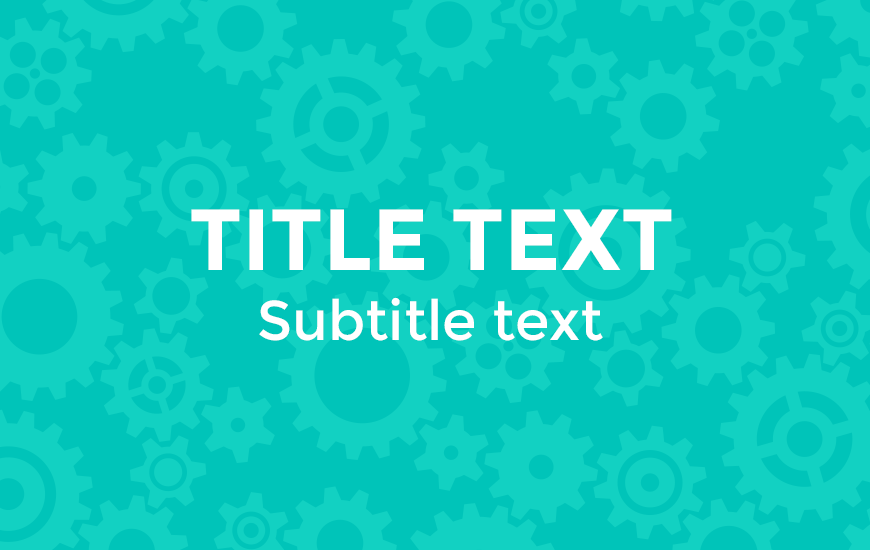
<style>
.page{position:relative;width:870px;height:550px;background:#00c4b9}
.page>*{position:absolute;margin:0}
.t1{font:86.6px "Montserrat-Bold";color:#ffffff}
.t2{font:55.6px "Montserrat-Regular";color:#ffffff}
</style>
<div class="page">
<p class="t1" style="left:191px;top:209px;width:481px;height:61px">TITLE TEXT</p>
<p class="t1" style="left:191px;top:209px;width:481px;height:61px">TITLE TEXT</p>
<p class="t1" style="left:191px;top:209px;width:481px;height:61px">TITLE TEXT</p>
<p class="t1" style="left:191px;top:209px;width:481px;height:61px">TITLE TEXT</p>
<p class="t2" style="left:259px;top:297px;width:344px;height:44px">Subtitle text</p>
<p class="t2" style="left:259px;top:297px;width:344px;height:44px">Subtitle text</p>
<p class="t2" style="left:259px;top:297px;width:344px;height:44px">Subtitle text</p>
<p class="t2" style="left:259px;top:297px;width:344px;height:44px">Subtitle text</p>
</div>
